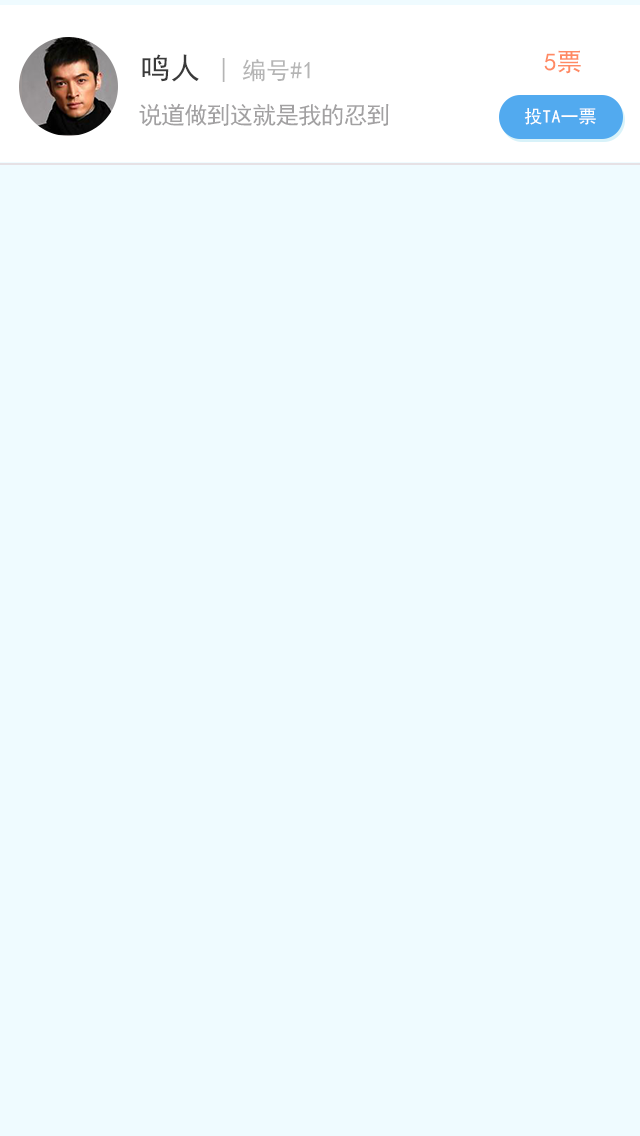
<style>
.page{position:relative;width:640px;height:1136px;background:#effbff}
.page>*{position:absolute;margin:0}
.t1{font:24px "SimHei";letter-spacing:0.005em;color:#b5b5b5}
.t2{font:30px "SimHei";letter-spacing:0.005em;color:#3a393a}
.t3{font:25px "SimHei";letter-spacing:0.005em;color:#ff8a63}
.t4{font:24px "SimHei";letter-spacing:-0.05em;color:#a2a1a2}
.t5{font:18px "SimHei";letter-spacing:0.005em;color:#ffffff}
</style>
<div class="page">
<p class="t1" style="left:142px;top:54px;width:168px;height:28px"><span class="t2">鸣人 </span>| 编号#1</p>
<p class="t3" style="left:544px;top:50px;width:37px;height:24px">5票</p>
<p class="t4" style="left:139px;top:103px;width:250px;height:23px">说道做到这就是我的忍到</p>
<p class="t5" style="left:524px;top:108px;width:72px;height:17px">投TA一票</p>
</div>
